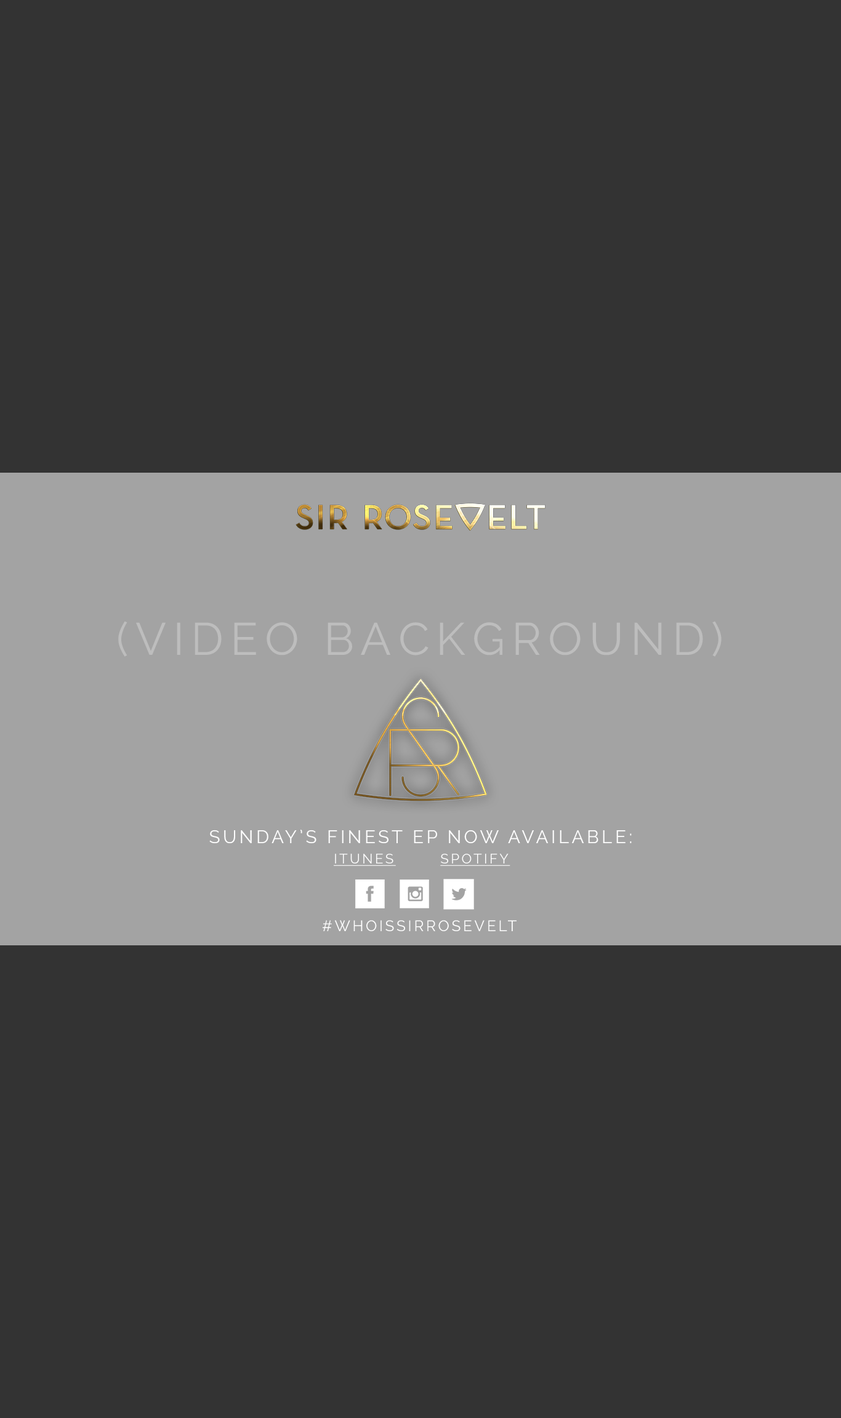
<style>
.page{position:relative;width:841px;height:1418px;background:#333333}
.page>*{position:absolute;margin:0}
.t1{font:45.3px "Raleway";letter-spacing:0.15em;color:#bdbdbd;text-transform:uppercase}
.t2{font:18.2px/22.7px "Raleway";letter-spacing:0.15em;color:#ffffff;text-transform:uppercase}
.t3{font:13.7px/20.3px "Raleway";letter-spacing:0.15em;color:#ffffff;text-transform:uppercase;text-decoration:underline}
.t4{font:15px "Raleway";letter-spacing:0.15em;color:#ffffff;text-transform:uppercase}
</style>
<div class="page">
<p class="t1" style="left:118px;top:621px;width:603px;height:36px">(video background)</p>
<p class="t2" style="left:209px;top:830px;width:423px;height:36px;text-align:center">sunday’s finest EP now available:<br><span class="t3">itunes        spotify</span></p>
<p class="t4" style="left:323px;top:920px;width:193px;height:11px">#whoissirrosevelt</p>
</div>
